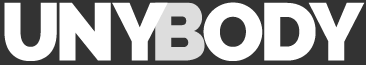
<style>
.page{position:relative;width:366px;height:65px;background:#ffffff}
.page>*{position:absolute;margin:0}
.t1{font:81px "Raleway-Black";letter-spacing:-0.035em;color:#ffffff;text-transform:uppercase}
.t2{font:81px "Raleway-Black";letter-spacing:-0.075em;color:#ffffff;text-transform:uppercase}
.t3{font:81px "Raleway-Black";letter-spacing:-0.055em;color:#ffffff;text-transform:uppercase}
.t4{font:81px "Raleway-Black";letter-spacing:-0.055em;color:#dddddd;text-transform:uppercase}
</style>
<div class="page">
<p class="t1" style="left:4px;top:2px;width:164px;height:59px"><span class="t2">u</span>ny</p>
<p class="t3" style="left:155px;top:2px;width:210px;height:59px"><span class="t4">b</span>ody</p>
</div>
